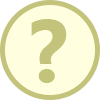
<style>
.page{position:relative;width:100px;height:100px;background:#ffffe0}
.page>*{position:absolute;margin:0}
.t1{font:21.4px "MyanmarText-Bold";color:#c3c37c}
</style>
<div class="page">
<p class="t1" style="left:31px;top:19px;width:36px;height:64px">?</p>
</div>
